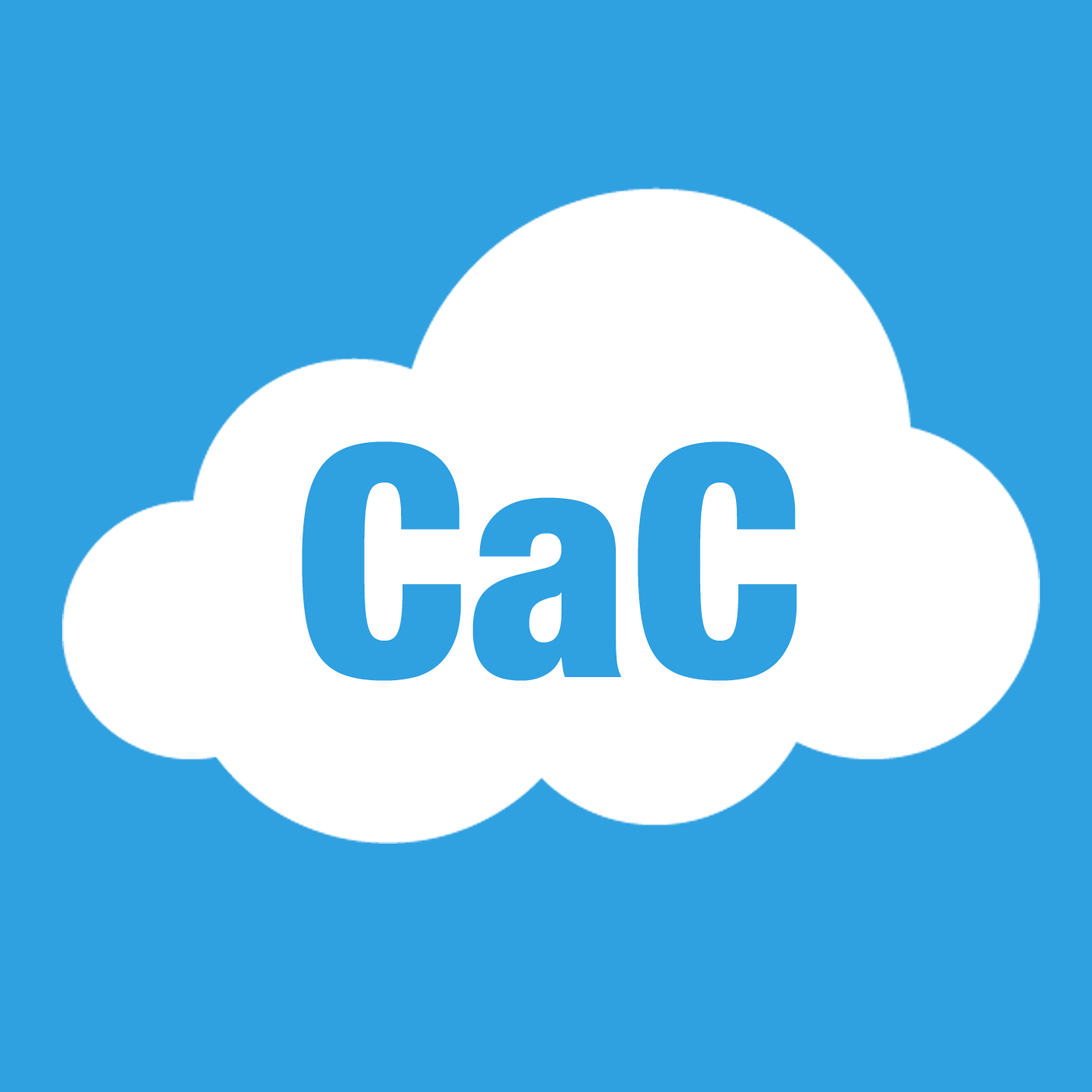
<style>
.page{position:relative;width:1092px;height:1092px;background:#2fa0e0}
.page>*{position:absolute;margin:0}
.t1{font:323.1px "HelveticaNeue-CondensedBlack";color:#2fa0e0}
</style>
<div class="page">
<p class="t1" style="left:302px;top:441px;width:495px;height:240px">CaC</p>
</div>
